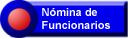
<style>
.page{position:relative;width:130px;height:38px;background:#0000ea}
.page>*{position:absolute;margin:0}
.t1{font:11px "Arial-BoldMT";color:#ffffff}
</style>
<div class="page">
<p class="t1" style="left:42px;top:8px;width:68px;height:21px">Nómina de Funcionarios</p>
</div>
